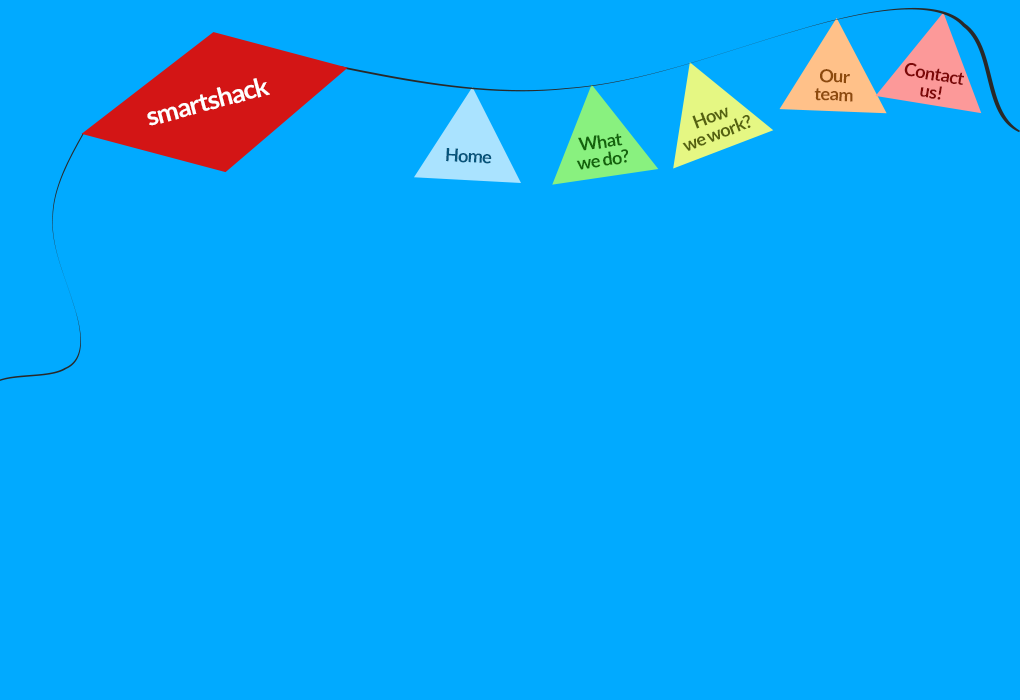
<style>
.page{position:relative;width:1020px;height:700px;background:#01aaff}
.page>*{position:absolute;margin:0}
.t1{font:18px/11px "Lato-Bold";letter-spacing:-0.04em;color:#7d0808}
.t2{font:26px "Lato-Bold";letter-spacing:-0.04em;color:#ffffff}
.t3{font:18px/11px "Lato-Bold";letter-spacing:-0.04em;color:#8d4a0d}
.t4{font:18px/11px "Lato-Bold";letter-spacing:-0.04em;color:#556210}
.t5{font:18px/11px "Lato-Bold";letter-spacing:-0.04em;color:#14640c}
.t6{font:18px "Lato-Bold";letter-spacing:-0.04em;color:#05547b}
</style>
<div class="page">
<p class="t1" style="left:904px;top:63px;width:60px;height:37px;text-align:center;rotate:9deg">Contact<br>us!</p>
<p class="t2" style="left:147px;top:78px;width:123px;height:48px;rotate:-15deg">smartshack</p>
<p class="t3" style="left:814px;top:69px;width:39px;height:33px;text-align:center;rotate:2deg">Our<br>team</p>
<p class="t4" style="left:682px;top:107px;width:69px;height:44px;text-align:center;rotate:-21deg">How<br>we work?</p>
<p class="t5" style="left:576px;top:133px;width:52px;height:37px;text-align:center;rotate:-8deg">What <br>we do?</p>
<p class="t6" style="left:446px;top:148px;width:46px;height:16px;rotate:3deg">Home</p>
</div>
